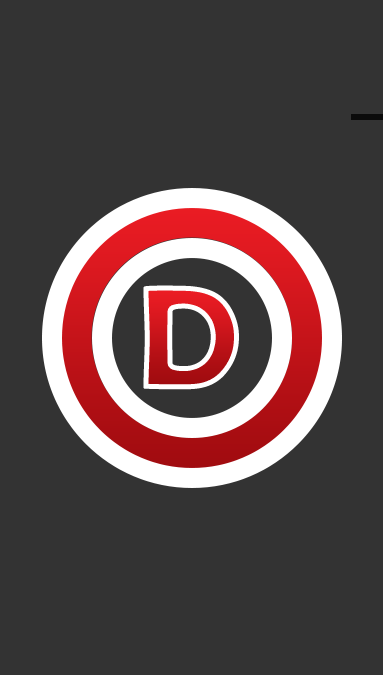
<style>
.page{position:relative;width:383px;height:675px;background:#333333}
.page>*{position:absolute;margin:0}
.t1{font:150px "BerlinSansFBDemi-Bold";letter-spacing:0.2em}
</style>
<div class="page">
<p class="t1" style="left:143px;top:285px;width:96px;height:105px">D</p>
</div>
